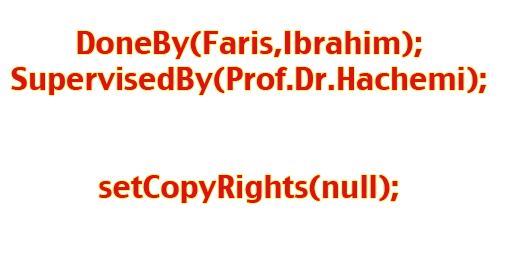
<style>
.page{position:relative;width:512px;height:256px;background:#ffffff}
.page>*{position:absolute;margin:0}
.t1{font:30px "CharcoalCY";color:#da1313}
</style>
<div class="page">
<p class="t1" style="left:11px;top:31px;width:475px;height:172px;text-align:center">DoneBy(Faris,Ibrahim);<br>SupervisedBy(Prof.Dr.Hachemi);<br><br><br>setCopyRights(null);</p>
</div>
